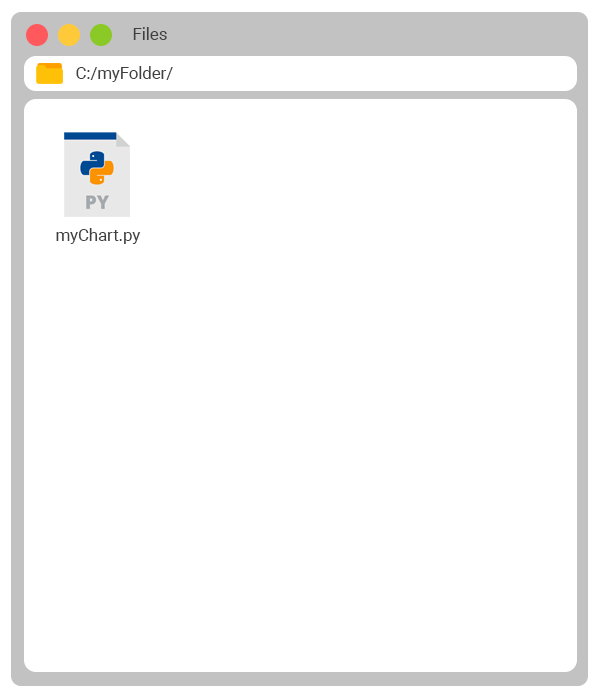
<style>
.page{position:relative;width:600px;height:700px;background:#ffffff}
.page>*{position:absolute;margin:0}
.t1{font:16.7px "Roboto-Regular";color:#404040}
</style>
<div class="page">
<p class="t1" style="left:133px;top:27px;width:34px;height:13px">Files</p>
<p class="t1" style="left:76px;top:66px;width:97px;height:16px">C:/myFolder/</p>
<p class="t1" style="left:56px;top:228px;width:85px;height:16px">myChart.py</p>
</div>
